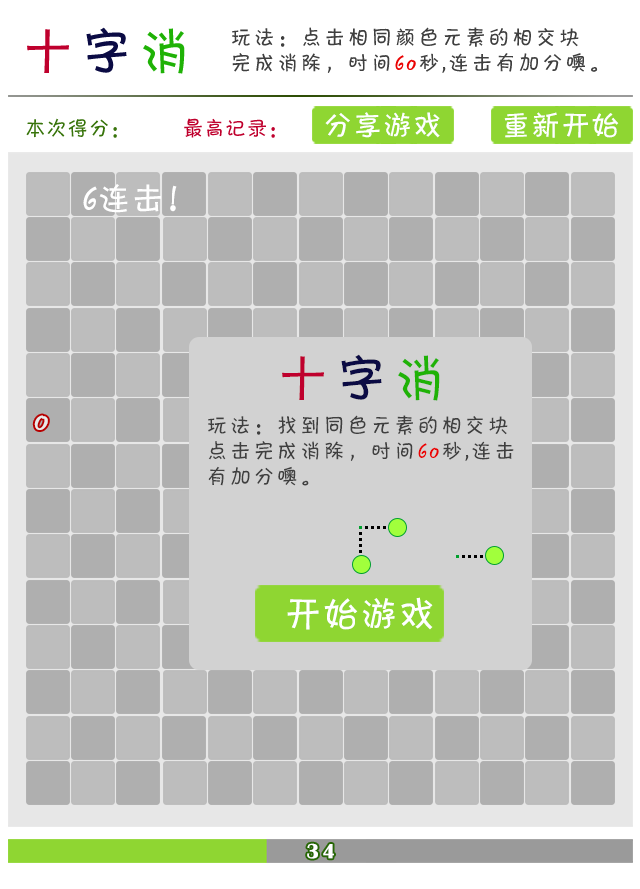
<style>
.page{position:relative;width:640px;height:889px;background:#ffffff}
.page>*{position:absolute;margin:0}
.t1{font:53.3px "FZKATFW--GB1-0";letter-spacing:0.1em;color:#bf002d}
.t2{font:53.3px "FZKATFW--GB1-0";letter-spacing:0.1em;color:#0b0b44}
.t3{font:53.3px "FZKATFW--GB1-0";letter-spacing:0.1em;color:#1fb206}
.t4{font:21.3px "FZKATJW--GB1-0";letter-spacing:0.1em;color:#3f3f3f}
.t5{font:21.3px "FZKATJW--GB1-0";letter-spacing:0.1em;color:#ea0303}
.t6{font:30px "FZKATJW--GB1-0";color:#ffffff}
.t7{font:33.7px "FZKATJW--GB1-0";color:#ffffff}
.t8{font:38px "FZKATJW--GB1-0";color:#ffffff}
.t9{font:21.3px "BritannicBold";letter-spacing:0.14em;color:#ffffff}
</style>
<div class="page">
<p class="t1" style="left:27px;top:27px;width:158px;height:47px">十<span class="t2">字</span><span class="t3">消</span></p>
<p class="t4" style="left:232px;top:27px;width:366px;height:46px">玩法：点击相同颜色元素的相交块<br>完成消除，时间<span class="t5">60</span>秒,连击有加分噢。</p>
<p class="t6" style="left:325px;top:112px;width:115px;height:26px">分享游戏</p>
<p class="t6" style="left:504px;top:112px;width:115px;height:26px">重新开始</p>
<p class="t7" style="left:83px;top:184px;width:94px;height:29px">6连击！</p>
<p class="t1" style="left:282px;top:354px;width:158px;height:47px">十<span class="t2">字</span><span class="t3">消</span></p>
<p class="t4" style="left:208px;top:415px;width:306px;height:71px">玩法：找到同色元素的相交块<br>点击完成消除，时间<span class="t5">60</span>秒,连击<br>有加分噢。</p>
<p class="t8" style="left:287px;top:597px;width:146px;height:33px">开始游戏</p>
<p class="t9" style="left:307px;top:843px;width:27px;height:16px">34</p>
</div>
